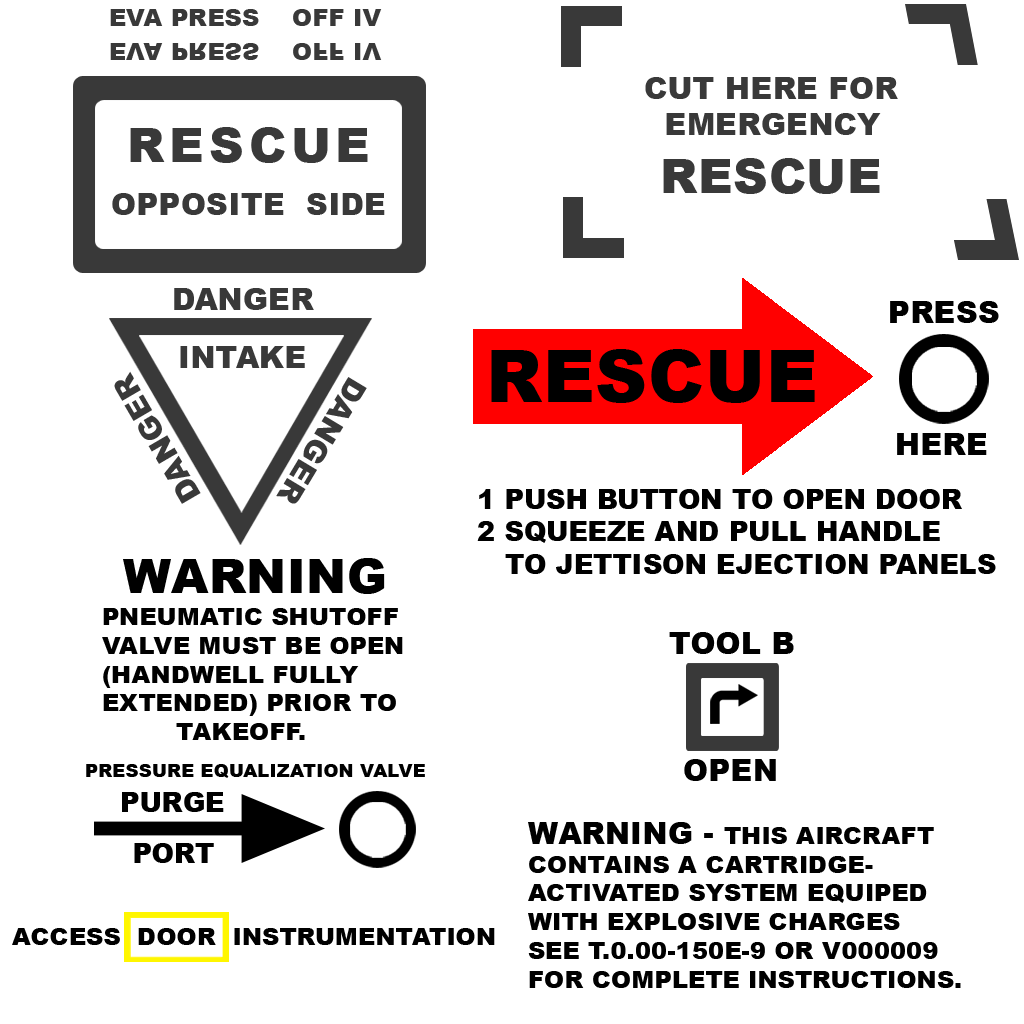
<style>
.page{position:relative;width:1024px;height:1024px;background:#ffffff}
.page>*{position:absolute;margin:0}
.t1{font:24px "Arial-Black";letter-spacing:0.01em;color:#393939}
.t2{font:30px "Arial-Black";letter-spacing:0.01em;color:#393939}
.t3{font:48px "Arial-Black";letter-spacing:0.01em;color:#393939}
.t4{font:48px "Arial-Black";letter-spacing:0.1em;color:#393939}
.t5{font:30px "Arial-Black";letter-spacing:0.01em;color:#000000}
.t6{font:72px "Arial-Black";letter-spacing:0.01em;color:#000000}
.t7{font:27px "Arial-Black";letter-spacing:0.01em;color:#000000}
.t8{font:48px "Arial-Black";letter-spacing:0.01em;color:#000000}
.t9{font:24px "Arial-Black";letter-spacing:0.01em;color:#000000}
.t10{font:18px "Arial-Black";letter-spacing:0.01em;color:#000000}
</style>
<div class="page">
<p class="t1" style="left:110px;top:9px;width:272px;height:17px">EVA PRESS    OFF IV</p>
<p class="t1" style="left:110px;top:43px;width:272px;height:17px">EVA PRESS    OFF IV</p>
<p class="t2" style="left:645px;top:77px;width:253px;height:117px">CUT HERE FOR<br>  EMERGENCY <br><span class="t3"> RESCUE</span></p>
<p class="t2" style="left:112px;top:127px;width:273px;height:88px"><span class="t1">  </span><span class="t4">RESCUE<br><br></span>OPPOSITE  SIDE</p>
<p class="t2" style="left:174px;top:288px;width:140px;height:22px">DANGER</p>
<p class="t5" style="left:890px;top:301px;width:109px;height:22px">PRESS</p>
<p class="t2" style="left:180px;top:346px;width:125px;height:22px">INTAKE</p>
<p class="t6" style="left:491px;top:349px;width:324px;height:54px">RESCUE</p>
<p class="t2" style="left:114px;top:371px;width:87px;height:133px;rotate:-120deg">DANGER</p>
<p class="t2" style="left:276px;top:377px;width:91px;height:127px;rotate:121deg">DANGER</p>
<p class="t5" style="left:897px;top:433px;width:90px;height:22px">HERE</p>
<p class="t7" style="left:477px;top:489px;width:519px;height:85px">1 PUSH BUTTON TO OPEN DOOR<br>2 SQUEEZE AND PULL HANDLE <br>   TO JETTISON EJECTION PANELS</p>
<p class="t8" style="left:123px;top:558px;width:262px;height:36px">WARNING</p>
<p class="t9" style="left:102px;top:608px;width:301px;height:132px">PNEUMATIC SHUTOFF <br>VALVE MUST BE OPEN <br>(HANDWELL FULLY <br>EXTENDED) PRIOR TO <br>         TAKEOFF.</p>
<p class="t5" style="left:669px;top:632px;width:125px;height:22px">TOOL B</p>
<p class="t5" style="left:684px;top:759px;width:92px;height:22px">OPEN</p>
<p class="t10" style="left:86px;top:764px;width:339px;height:14px">PRESSURE EQUALIZATION VALVE</p>
<p class="t7" style="left:122px;top:792px;width:102px;height:20px">PURGE</p>
<p class="t9" style="left:528px;top:822px;width:433px;height:166px"><span class="t5">WARNING - </span>THIS AIRCRAFT <br>CONTAINS A CARTRIDGE-<br>ACTIVATED SYSTEM EQUIPED<br>WITH EXPLOSIVE CHARGES<br>SEE T.0.00-150E-9 OR V000009 <br>FOR COMPLETE INSTRUCTIONS.</p>
<p class="t7" style="left:134px;top:843px;width:80px;height:20px">PORT</p>
<p class="t9" style="left:12px;top:928px;width:483px;height:17px">ACCESS  DOOR  INSTRUMENTATION</p>
</div>
